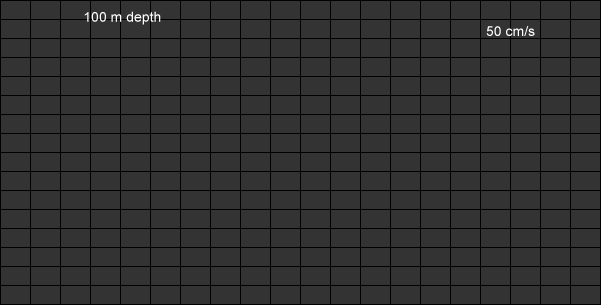
<style>
.page{position:relative;width:601px;height:305px;background:#333333}
.page>*{position:absolute;margin:0}
.t1{font:14px "ArialMT";color:#ffffff}
</style>
<div class="page">
<p class="t1" style="left:84px;top:11px;width:77px;height:14px">100 m depth</p>
<p class="t1" style="left:486px;top:26px;width:49px;height:10px">50 cm/s</p>
</div>
